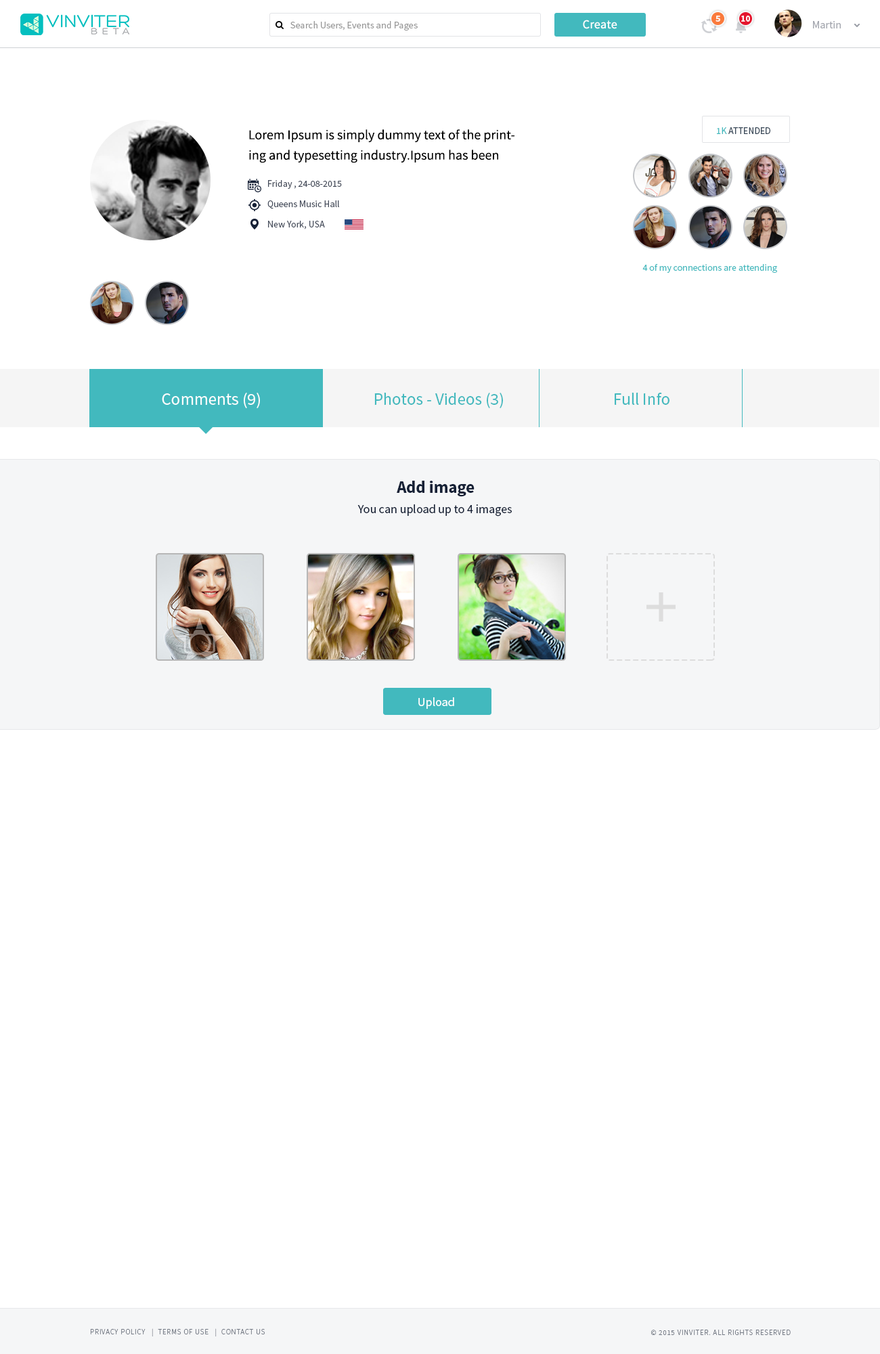
<style>
.page{position:relative;width:880px;height:1354px;background:#ffffff}
.page>*{position:absolute;margin:0}
.t1{font:8.8px "SourceSansPro-Bold";color:#ffffff}
.t2{font:9.7px "SourceSansPro-Regular";color:#999999}
.t3{font:12.2px "SourceSansPro-Regular";letter-spacing:0.02em;color:#ffffff}
.t4{font:10.8px "SourceSansPro-Regular";color:#a3a6ae}
.t5{font:13.5px/20.3px "SourceSansPro-Regular";color:#000000}
.t6{font:9.5px "SourceSansPro-Regular";color:#364656}
.t7{font:9.5px "SourceSansPro-Regular";color:#42b9be}
.t8{font:9.5px/13.5px "SourceSansPro-Regular";color:#464d5c}
.t9{font:16.9px "SourceSansPro-Regular";color:#fefefe}
.t10{font:16.9px "SourceSansPro-Regular";color:#42b9be}
.t11{font:16.9px "SourceSansPro-Bold";color:#162136}
.t12{font:12.2px "SourceSansPro-Regular";color:#162136}
.t13{font:12.2px "SourceSansPro-Regular";color:#ffffff}
.t14{font:7.4px "SourceSansPro-Light";letter-spacing:0.075em;color:#747a85;text-transform:uppercase}
</style>
<div class="page">
<p class="t1" style="left:716px;top:16px;width:5px;height:6px">5</p>
<p class="t1" style="left:742px;top:16px;width:8px;height:6px">10</p>
<p class="t2" style="left:291px;top:21px;width:127px;height:10px">Search Users, Events and Pages</p>
<p class="t3" style="left:583px;top:20px;width:35px;height:9px">Create</p>
<p class="t4" style="left:813px;top:21px;width:28px;height:7px">Martin</p>
<p class="t5" style="left:249px;top:129px;width:266px;height:34px">Lorem Ipsum is simply dummy text of the printing and typesetting industry.Ipsum has been</p>
<p class="t6" style="left:717px;top:127px;width:54px;height:7px"><span class="t7">1K </span>ATTENDED</p>
<p class="t8" style="left:268px;top:180px;width:74px;height:50px">Friday , 24-08-2015<br>Queens Music Hall<br>New York, USA</p>
<p class="t7" style="left:643px;top:264px;width:134px;height:9px">4 of my connections are attending</p>
<p class="t9" style="left:162px;top:393px;width:98px;height:15px">Comments (9)</p>
<p class="t10" style="left:375px;top:393px;width:128px;height:15px">Photos - Videos (3)</p>
<p class="t10" style="left:615px;top:393px;width:55px;height:12px">Full Info</p>
<p class="t11" style="left:397px;top:481px;width:78px;height:16px">Add image</p>
<p class="t12" style="left:358px;top:505px;width:154px;height:12px">You can upload up to 4 images</p>
<p class="t13" style="left:419px;top:698px;width:35px;height:11px">Upload</p>
<p class="t14" style="left:90px;top:1329px;width:175px;height:8px">Privacy Policy   |  Terms of Use   |  Contact us</p>
<p class="t14" style="left:651px;top:1330px;width:140px;height:5px">© 2015 VINVITER. All rights reserved</p>
</div>
